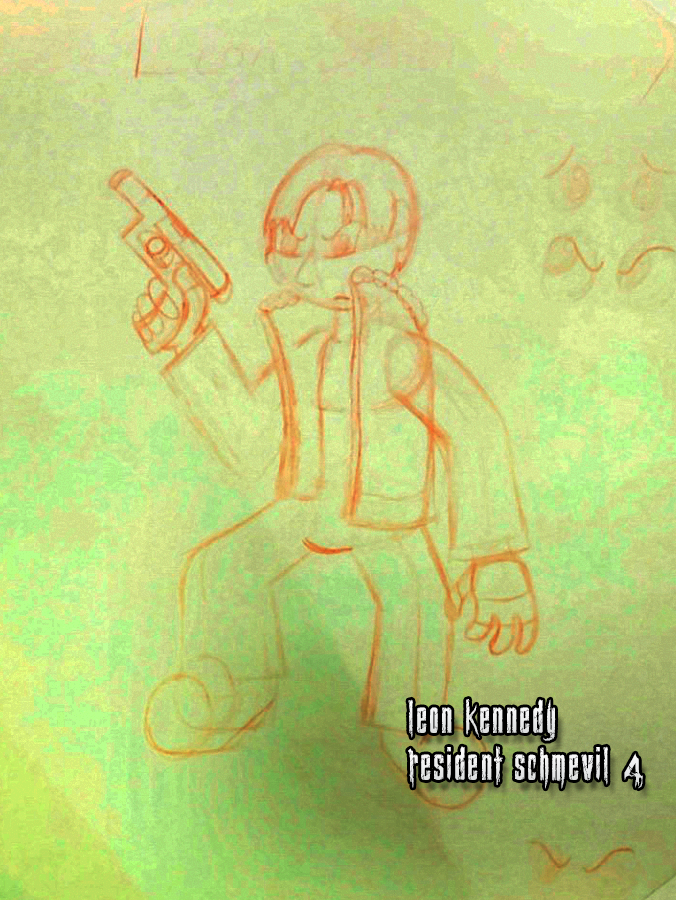
<style>
.page{position:relative;width:676px;height:900px}
.page>*{position:absolute;margin:0}
.t1{font:40px "BiohazardGameFont-ResidentEvilGameFont";color:#ffffff}
</style>
<div class="page">
<p class="t1" style="left:408px;top:699px;width:148px;height:42px">leon kennedy</p>
<p class="t1" style="left:408px;top:746px;width:235px;height:43px">resident schmevil $</p>
</div>
